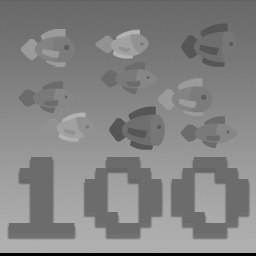
<style>
.page{position:relative;width:256px;height:256px}
.page>*{position:absolute;margin:0}
.t1{font:87.2px "PressStart2P-Regular";color:#6c6c6c}
</style>
<div class="page">
<p class="t1" style="left:8px;top:157px;width:241px;height:77px">100</p>
</div>
